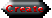
<style>
.page{position:relative;width:52px;height:18px;background:#ffffff}
.page>*{position:absolute;margin:0}
.t1{font:10px "LucidaSansUnicode";font-weight:bold}
</style>
<div class="page">
<p class="t1" style="left:6px;top:5px;width:37px;height:7px">Create</p>
</div>
